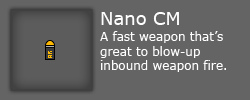
<style>
.page{position:relative;width:250px;height:100px;background:#646464}
.page>*{position:absolute;margin:0}
.t1{font:18px "Verdana";color:#ffffff}
.t2{font:12px "Verdana";color:#ffffff}
</style>
<div class="page">
<p class="t1" style="left:101px;top:12px;width:78px;height:13px">Nano CM</p>
<p class="t2" style="left:100px;top:31px;width:126px;height:41px">A fast weapon that’s great to blow-up inbound weapon fire.</p>
</div>
